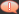
<style>
.page{position:relative;width:19px;height:14px;background:#333333}
.page>*{position:absolute;margin:0}
.t1{font:9px "LucidaFax";letter-spacing:0.05em;color:#ffffff}
</style>
<div class="page">
<p class="t1" style="left:9px;top:3px;width:1px;height:7px">!</p>
</div>
